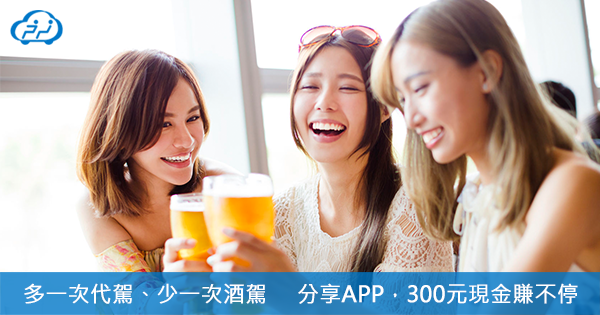
<style>
.page{position:relative;width:600px;height:315px}
.page>*{position:absolute;margin:0}
.t1{font:22px "MicrosoftJhengHeiRegular";color:#ffffff;font-weight:bold}
</style>
<div class="page">
<p class="t1" style="left:24px;top:283px;width:554px;height:21px">多一次代駕、少一次酒駕     分享APP，300元現金賺不停</p>
</div>
